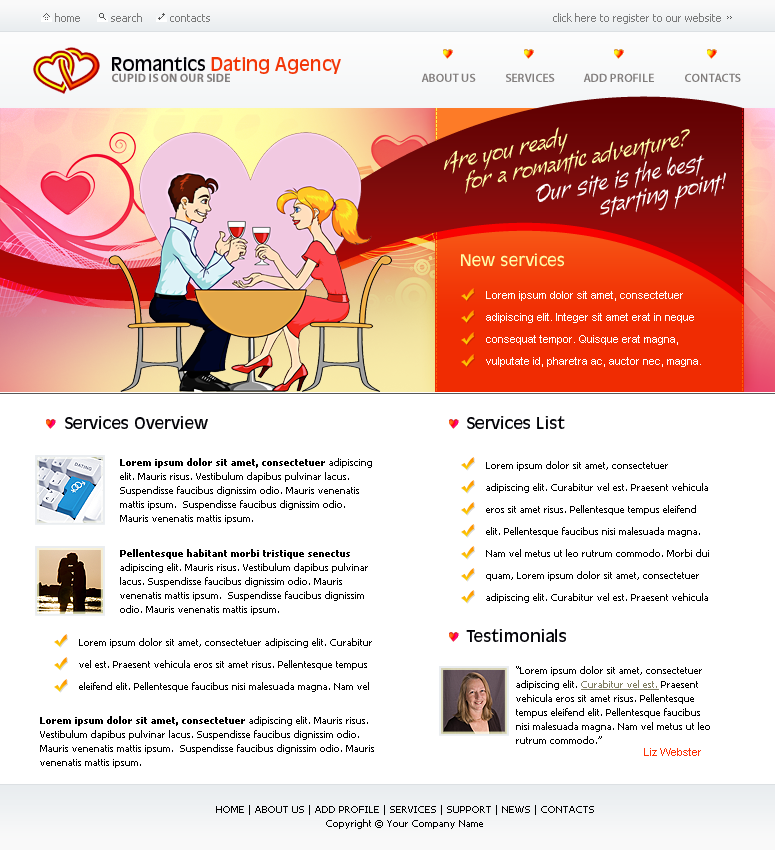
<style>
.page{position:relative;width:775px;height:850px;background:#ffffff}
.page>*{position:absolute;margin:0}
.t1{font:11px "Tahoma";color:#7b7b7b}
.t2{font:18px "AntiqueOliveStd-Roman";color:#f23607}
.t3{font:18px "AntiqueOliveStd-Roman";color:#000005}
.t4{font:12px "MyriadPro-Bold";color:#817d7c}
.t5{font:12px "MyriadPro-Semibold";color:#817d7c}
.t6{font:10px "Tahoma"}
.t7{font:24px "Alma-Alternates";color:#fffea8}
.t8{font:24px "Alma-Alternates";color:#ffffff}
.t9{font:16px "AntiqueOliveStd-Roman";color:#fffea8}
.t10{font:11px/22px "ArialMT";color:#ffffff}
.t11{font:16px "AntiqueOliveStd-Roman";color:#000005}
.t12{font:10px/14px "Tahoma";color:#000000}
.t13{font:10px/14px "Tahoma-Bold";color:#000000}
.t14{font:10px/22px "Tahoma";color:#000000}
.t15{font:10px/14px "Tahoma";color:#7f7c5f;text-decoration:underline}
.t16{font:11px "ArialMT";color:#fb3206}
</style>
<div class="page">
<p class="t1" style="left:55px;top:13px;width:25px;height:9px">home</p>
<p class="t1" style="left:111px;top:13px;width:31px;height:9px">search</p>
<p class="t1" style="left:170px;top:14px;width:40px;height:8px">contacts</p>
<p class="t1" style="left:553px;top:13px;width:168px;height:11px">click here to register to our website</p>
<p class="t2" style="left:112px;top:57px;width:229px;height:17px"><span class="t3">Romantics </span>Dating Agency</p>
<p class="t4" style="left:112px;top:73px;width:118px;height:9px">CUPID IS ON OUR SIDE</p>
<p class="t5" style="left:421px;top:73px;width:55px;height:9px">ABOUT US</p>
<p class="t5" style="left:506px;top:73px;width:49px;height:9px">SERVICES</p>
<p class="t5" style="left:583px;top:73px;width:71px;height:9px">ADD PROFILE</p>
<p class="t5" style="left:685px;top:73px;width:56px;height:9px">CONTACTS</p>
<p class="t6" style="left:742px;top:108px;width:1px;height:299px;rotate:90deg">---------------------------------------------------------------------------</p>
<p class="t7" style="left:444px;top:127px;width:124px;height:47px;rotate:-12deg">Are you ready</p>
<p class="t7" style="left:465px;top:129px;width:225px;height:65px;rotate:-11deg">for a romantic adventure?</p>
<p class="t8" style="left:536px;top:155px;width:169px;height:47px;rotate:-11deg">Our site is the best</p>
<p class="t8" style="left:600px;top:172px;width:126px;height:46px;rotate:-11deg">starting point!</p>
<p class="t9" style="left:461px;top:253px;width:103px;height:14px">New services</p>
<p class="t10" style="left:486px;top:291px;width:215px;height:76px">Lorem ipsum dolor sit amet, consectetuer adipiscing elit. Integer sit amet erat in neque consequat tempor. Quisque erat magna, vulputate id, pharetra ac, auctor nec, magna.</p>
<p class="t11" style="left:65px;top:416px;width:143px;height:13px">Services Overview</p>
<p class="t11" style="left:467px;top:416px;width:98px;height:13px">Services List</p>
<p class="t12" style="left:120px;top:458px;width:252px;height:66px"><span class="t13">Lorem ipsum dolor sit amet, consectetuer</span> adipiscing elit. Mauris risus. Vestibulum dapibus pulvinar lacus. Suspendisse faucibus dignissim odio. Mauris venenatis mattis ipsum.  Suspendisse faucibus dignissim odio. Mauris venenatis mattis ipsum.</p>
<p class="t14" style="left:486px;top:461px;width:223px;height:142px">Lorem ipsum dolor sit amet, consectetuer adipiscing elit. Curabitur vel est. Praesent vehicula eros sit amet risus. Pellentesque tempus eleifend elit. Pellentesque faucibus nisi malesuada magna. Nam vel metus ut leo rutrum commodo. Morbi dui quam, Lorem ipsum dolor sit amet, consectetuer adipiscing elit. Curabitur vel est. Praesent vehicula</p>
<p class="t12" style="left:120px;top:549px;width:248px;height:66px"><span class="t13">Pellentesque habitant morbi tristique senectus </span>adipiscing elit. Mauris risus. Vestibulum dapibus pulvinar lacus. Suspendisse faucibus dignissim odio. Mauris venenatis mattis ipsum.  Suspendisse faucibus dignissim odio. Mauris venenatis mattis ipsum.</p>
<p class="t11" style="left:466px;top:629px;width:100px;height:13px">Testimonials</p>
<p class="t14" style="left:79px;top:638px;width:293px;height:54px">Lorem ipsum dolor sit amet, consectetuer adipiscing elit. Curabitur vel est. Praesent vehicula eros sit amet risus. Pellentesque tempus eleifend elit. Pellentesque faucibus nisi malesuada magna. Nam vel</p>
<p class="t12" style="left:516px;top:666px;width:194px;height:78px">“Lorem ipsum dolor sit amet, consectetuer adipiscing elit. <span class="t15">Curabitur vel est.</span> Praesent vehicula eros sit amet risus. Pellentesque tempus eleifend elit. Pellentesque faucibus nisi malesuada magna. Nam vel metus ut leo rutrum commodo.”</p>
<p class="t12" style="left:40px;top:716px;width:334px;height:52px"><span class="t13">Lorem ipsum dolor sit amet, consectetuer</span> adipiscing elit. Mauris risus. Vestibulum dapibus pulvinar lacus. Suspendisse faucibus dignissim odio. Mauris venenatis mattis ipsum.  Suspendisse faucibus dignissim odio. Mauris venenatis mattis ipsum.</p>
<p class="t16" style="left:644px;top:748px;width:57px;height:8px">Liz Webster</p>
<p class="t12" style="left:216px;top:805px;width:378px;height:24px;text-align:center">HOME | ABOUT US | ADD PROFILE | SERVICES | SUPPORT | NEWS | CONTACTS<br>Copyright © Your Company Name</p>
</div>
